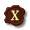
<style>
.page{position:relative;width:30px;height:30px;background:#ffffff}
.page>*{position:absolute;margin:0}
.t1{font:14px "CaslonAntique";color:#f4f6a3}
</style>
<div class="page">
<p class="t1" style="left:10px;top:10px;width:9px;height:11px">X</p>
</div>
